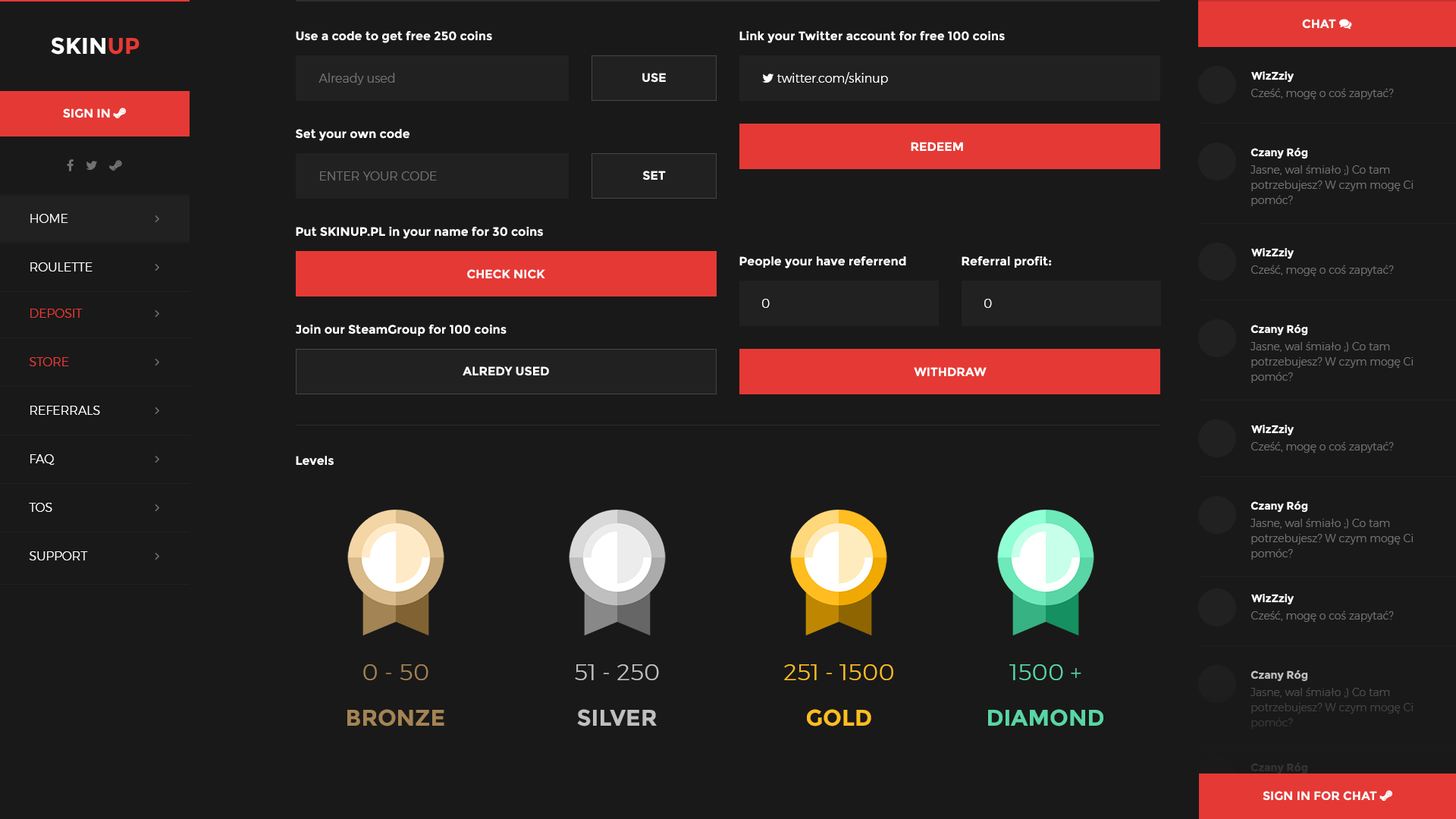
<style>
.page{position:relative;width:1456px;height:819px;background:#191919}
.page>*{position:absolute;margin:0}
.t1{font:22.7px "Montserrat-Bold";color:#fefefe}
.t2{font:22.7px "Montserrat-Bold";color:#e53935}
.t3{font:12.1px "Montserrat-Bold";color:#fefefe}
.t4{font:12.1px "Montserrat-Light";color:#717171}
.t5{font:10.7px "Montserrat-Bold";color:#fefefe}
.t6{font:10.7px "Montserrat-Light";color:#717171}
.t7{font:12.1px "Montserrat-Bold";color:#fffefe}
.t8{font:10.7px/15.2px "Montserrat-Light";color:#717171}
.t9{font:12.1px "Montserrat-Light";color:#fefefe}
.t10{font:12.1px "Montserrat-Light";color:#ffffff}
.t11{font:12.1px "Montserrat-Light";color:#e53935}
.t12{font:22.7px/45.5px "Montserrat-Light";color:#a38454}
.t13{font:22.7px/45.5px "Montserrat-Bold";color:#a38454}
.t14{font:22.7px/45.5px "Montserrat-Light";color:#bfbfbf}
.t15{font:22.7px/45.5px "Montserrat-Bold";color:#bfbfbf}
.t16{font:22.7px/45.5px "Montserrat-Light";color:#ffbd20}
.t17{font:22.7px/45.5px "Montserrat-Bold";color:#ffbd20}
.t18{font:22.7px/45.5px "Montserrat-Bold";color:#5ad5a5}
.t19{font:22.7px/45.5px "Montserrat-Light";color:#5ad5a5}
.t20{font:10.7px "Montserrat-Bold";color:#bfbfbf}
.t21{font:10.7px/15.2px "Montserrat-Light";color:#444444}
.t22{font:10.7px "Montserrat-Bold";color:#323232}
</style>
<div class="page">
<p class="t1" style="left:51px;top:37px;width:89px;height:18px">SKIN<span class="t2">UP</span></p>
<p class="t3" style="left:296px;top:31px;width:196px;height:12px">Use a code to get free 250 coins</p>
<p class="t3" style="left:739px;top:31px;width:266px;height:12px">Link your Twitter account for free 100 coins</p>
<p class="t4" style="left:318px;top:73px;width:77px;height:12px">Already used</p>
<p class="t3" style="left:642px;top:73px;width:24px;height:10px">USE</p>
<p class="t5" style="left:1251px;top:71px;width:43px;height:12px">WizZziy</p>
<p class="t6" style="left:1251px;top:88px;width:143px;height:11px">Cześć, mogę o coś zapytać?</p>
<p class="t3" style="left:296px;top:129px;width:113px;height:12px">Set your own code</p>
<p class="t7" style="left:911px;top:142px;width:52px;height:9px">REDEEM</p>
<p class="t5" style="left:1250px;top:147px;width:58px;height:12px">Czany Róg</p>
<p class="t4" style="left:320px;top:171px;width:117px;height:9px">ENTER YOUR CODE</p>
<p class="t3" style="left:642px;top:171px;width:24px;height:9px">SET</p>
<p class="t8" style="left:1250px;top:165px;width:164px;height:41px">Jasne, wal śmiało ;) Co tam <br>potrzebujesz? W czym mogę Ci<br>pomóc?</p>
<p class="t9" style="left:30px;top:214px;width:38px;height:9px">HOME</p>
<p class="t3" style="left:296px;top:227px;width:247px;height:12px">Put SKINUP.PL in your name for 30 coins</p>
<p class="t3" style="left:739px;top:256px;width:167px;height:12px">People your have referrend</p>
<p class="t3" style="left:962px;top:256px;width:90px;height:12px">Referral profit:</p>
<p class="t5" style="left:1251px;top:248px;width:43px;height:11px">WizZziy</p>
<p class="t9" style="left:30px;top:262px;width:63px;height:9px">ROULETTE</p>
<p class="t7" style="left:467px;top:269px;width:78px;height:10px">CHECK NICK</p>
<p class="t6" style="left:1251px;top:265px;width:143px;height:11px">Cześć, mogę o coś zapytać?</p>
<p class="t10" style="left:762px;top:299px;width:8px;height:9px">0</p>
<p class="t10" style="left:984px;top:299px;width:8px;height:9px">0</p>
<p class="t11" style="left:30px;top:309px;width:53px;height:9px">DEPOSIT</p>
<p class="t3" style="left:296px;top:325px;width:211px;height:11px">Join our SteamGroup for 100 coins</p>
<p class="t5" style="left:1250px;top:324px;width:58px;height:12px">Czany Róg</p>
<p class="t8" style="left:1250px;top:341px;width:164px;height:42px">Jasne, wal śmiało ;) Co tam <br>potrzebujesz? W czym mogę Ci<br>pomóc?</p>
<p class="t11" style="left:29px;top:357px;width:40px;height:9px">STORE</p>
<p class="t3" style="left:463px;top:366px;width:86px;height:10px">ALREDY USED</p>
<p class="t7" style="left:914px;top:367px;width:73px;height:9px">WITHDRAW</p>
<p class="t10" style="left:30px;top:406px;width:70px;height:9px">REFERRALS</p>
<p class="t5" style="left:1251px;top:425px;width:43px;height:11px">WizZziy</p>
<p class="t6" style="left:1251px;top:441px;width:143px;height:12px">Cześć, mogę o coś zapytać?</p>
<p class="t10" style="left:30px;top:454px;width:25px;height:11px">FAQ</p>
<p class="t3" style="left:296px;top:456px;width:38px;height:10px">Levels</p>
<p class="t10" style="left:29px;top:503px;width:23px;height:9px">TOS</p>
<p class="t5" style="left:1250px;top:500px;width:58px;height:13px">Czany Róg</p>
<p class="t8" style="left:1250px;top:518px;width:164px;height:42px">Jasne, wal śmiało ;) Co tam <br>potrzebujesz? W czym mogę Ci<br>pomóc?</p>
<p class="t10" style="left:29px;top:551px;width:59px;height:9px">SUPPORT</p>
<p class="t5" style="left:1251px;top:594px;width:43px;height:11px">WizZziy</p>
<p class="t6" style="left:1251px;top:610px;width:143px;height:12px">Cześć, mogę o coś zapytać?</p>
<p class="t12" style="left:347px;top:664px;width:97px;height:62px;text-align:center">0 - 50<br><span class="t13">BRONZE</span></p>
<p class="t14" style="left:575px;top:664px;width:84px;height:62px;text-align:center">51 - 250<br><span class="t15">SILVER</span></p>
<p class="t16" style="left:784px;top:664px;width:109px;height:62px;text-align:center">251 - 1500<br><span class="t17">GOLD</span></p>
<p class="t18" style="left:988px;top:664px;width:115px;height:62px;text-align:center"><span class="t19">1500 +<br></span>DIAMOND</p>
<p class="t20" style="left:1250px;top:670px;width:58px;height:12px">Czany Róg</p>
<p class="t21" style="left:1250px;top:687px;width:164px;height:42px">Jasne, wal śmiało ;) Co tam <br>potrzebujesz? W czym mogę Ci<br>pomóc?</p>
<p class="t22" style="left:1250px;top:762px;width:58px;height:12px">Czany Róg</p>
</div>
